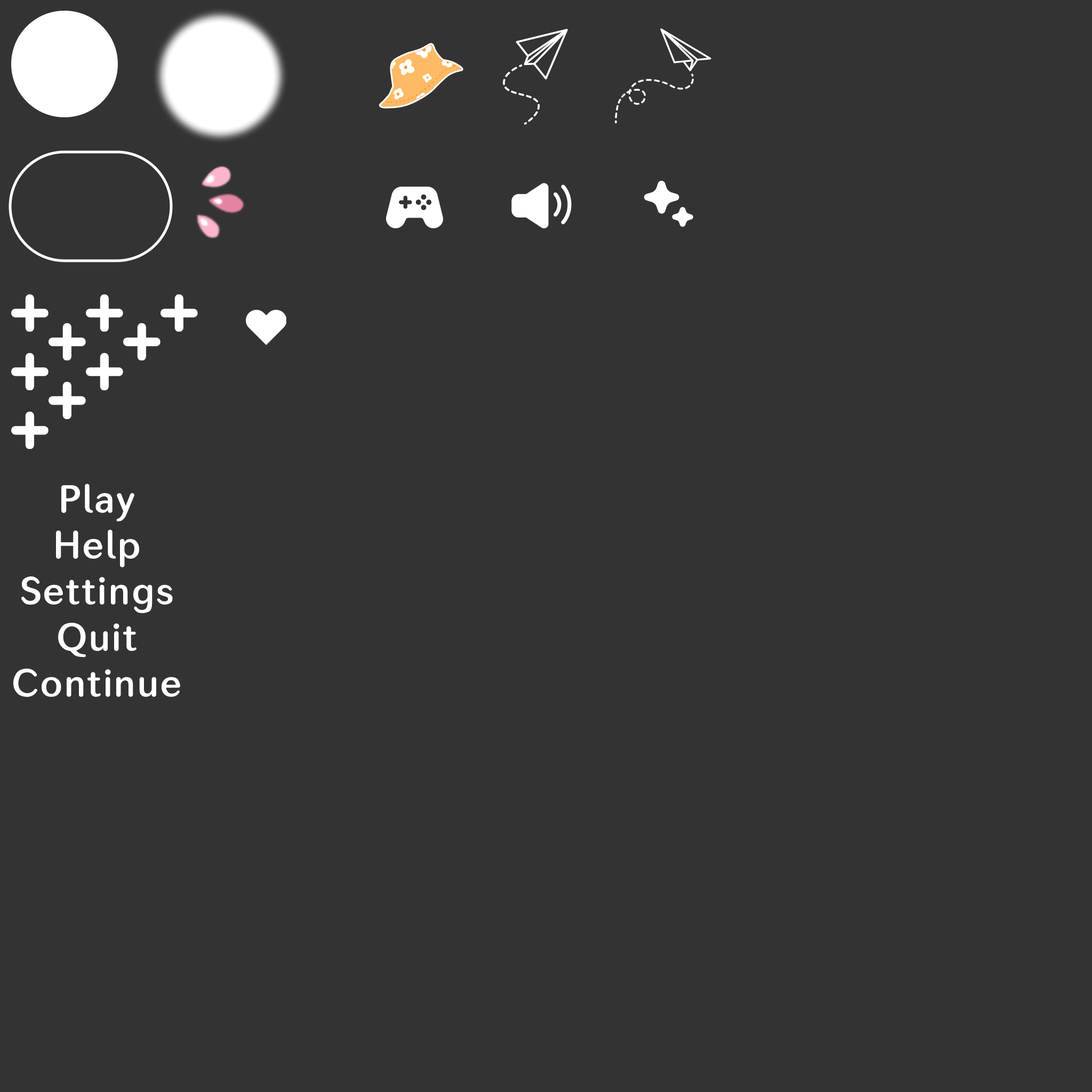
<style>
.page{position:relative;width:1092px;height:1092px;background:#333333}
.page>*{position:absolute;margin:0}
.t1{font:38.4px "SecondaRound-Shadow3Fill";color:#ffffff}
</style>
<div class="page">
<p class="t1" style="left:13px;top:484px;width:167px;height:213px;text-align:center">Play<br>Help<br>Settings<br>Quit<br>Continue</p>
</div>
